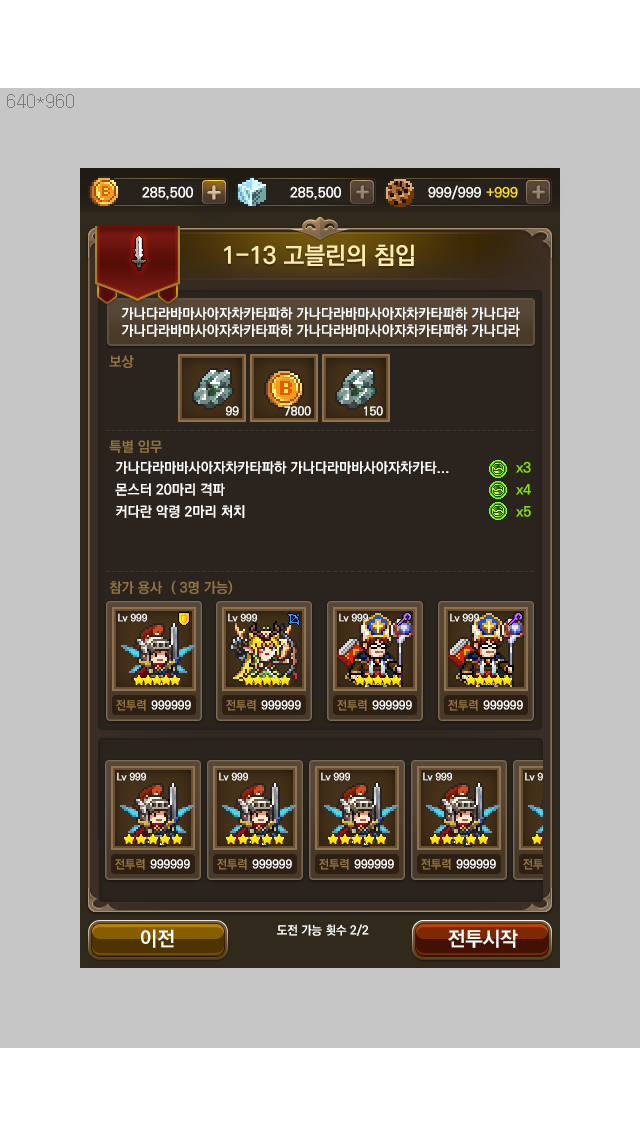
<style>
.page{position:relative;width:640px;height:1136px;background:#c6c6c6}
.page>*{position:absolute;margin:0}
.t1{font:24px "KoPubDotumBold";color:#ffedab}
.t2{font:14px "KoPubDotumBold";color:#ffffff}
.t3{font:14px "KoPubDotumBold";color:#937340}
.t4{font:11.9px "KoPubDotumBold";color:#ffffff}
.t5{font:14px/22px "KoPubDotumBold";color:#ffffff}
.t6{font:14px/22px "KoPubDotumBold";color:#8ae001}
.t7{font:10px "KoPubDotumBold";color:#ffffff}
.t8{font:12px "KoPubDotumBold";color:#937441}
.t9{font:12px "KoPubDotumBold";color:#ffffff}
.t10{font:20px "KoPubDotumBold";color:#ffffff}
.t11{font:20px "KoPubDotumBold"}
</style>
<div class="page">
<p class="t1" style="left:224px;top:244px;width:190px;height:23px">1-13 고블린의 침입</p>
<p class="t2" style="left:121px;top:307px;width:399px;height:30px">가나다라바마사아자차카타파하 가나다라바마사아자차카타파하 가나다라<br>가나다라바마사아자차카타파하 가나다라바마사아자차카타파하 가나다라</p>
<p class="t3" style="left:109px;top:355px;width:25px;height:13px">보상</p>
<p class="t4" style="left:226px;top:406px;width:13px;height:10px">99</p>
<p class="t4" style="left:284px;top:406px;width:27px;height:10px">7800</p>
<p class="t4" style="left:364px;top:406px;width:19px;height:10px">150</p>
<p class="t3" style="left:109px;top:440px;width:53px;height:13px">특별 임무</p>
<p class="t5" style="left:115px;top:461px;width:334px;height:57px">가나다라마바사아자차카타파하 가나다라마바사아자차카타...<br>몬스터 20마리 격파<br>커다란 악령 2마리 처치</p>
<p class="t6" style="left:516px;top:461px;width:15px;height:56px">x3<br>x4<br>x5</p>
<p class="t3" style="left:109px;top:581px;width:53px;height:13px">참가 용사</p>
<p class="t3" style="left:171px;top:580px;width:62px;height:15px">( 3명 가능)</p>
<p class="t7" style="left:118px;top:613px;width:29px;height:9px">Lv 999</p>
<p class="t7" style="left:228px;top:613px;width:29px;height:9px">Lv 999</p>
<p class="t7" style="left:339px;top:613px;width:29px;height:9px">Lv 999</p>
<p class="t7" style="left:450px;top:613px;width:29px;height:9px">Lv 999</p>
<p class="t8" style="left:116px;top:699px;width:30px;height:12px">전투력</p>
<p class="t9" style="left:151px;top:700px;width:40px;height:10px">999999</p>
<p class="t8" style="left:226px;top:699px;width:30px;height:12px">전투력</p>
<p class="t9" style="left:261px;top:700px;width:40px;height:10px">999999</p>
<p class="t8" style="left:337px;top:699px;width:30px;height:12px">전투력</p>
<p class="t9" style="left:372px;top:700px;width:40px;height:10px">999999</p>
<p class="t8" style="left:448px;top:699px;width:30px;height:12px">전투력</p>
<p class="t9" style="left:483px;top:700px;width:40px;height:10px">999999</p>
<p class="t10" style="left:141px;top:929px;width:33px;height:19px">이전</p>
<p class="t9" style="left:277px;top:924px;width:92px;height:12px">도전 가능 횟수 2/2</p>
<p class="t11" style="left:446px;top:929px;width:71px;height:19px">시련시작</p>
<p class="t10" style="left:448px;top:929px;width:70px;height:19px">전투시작</p>
</div>
